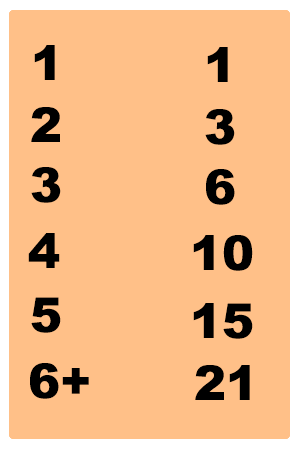
<style>
.page{position:relative;width:300px;height:450px;background:#ffc088}
.page>*{position:absolute;margin:0}
.t1{font:48px "Arial-Black";color:#000000}
</style>
<div class="page">
<p class="t1" style="left:34px;top:45px;width:21px;height:35px">1</p>
<p class="t1" style="left:207px;top:47px;width:21px;height:35px">1</p>
<p class="t1" style="left:31px;top:107px;width:29px;height:35px">2</p>
<p class="t1" style="left:205px;top:109px;width:30px;height:36px">3</p>
<p class="t1" style="left:31px;top:167px;width:30px;height:36px">3</p>
<p class="t1" style="left:206px;top:169px;width:29px;height:36px">6</p>
<p class="t1" style="left:28px;top:233px;width:32px;height:35px">4</p>
<p class="t1" style="left:193px;top:235px;width:60px;height:36px">10</p>
<p class="t1" style="left:31px;top:297px;width:30px;height:36px">5</p>
<p class="t1" style="left:193px;top:303px;width:60px;height:36px">15</p>
<p class="t1" style="left:30px;top:363px;width:59px;height:36px">6+</p>
<p class="t1" style="left:195px;top:365px;width:55px;height:35px">21</p>
</div>
